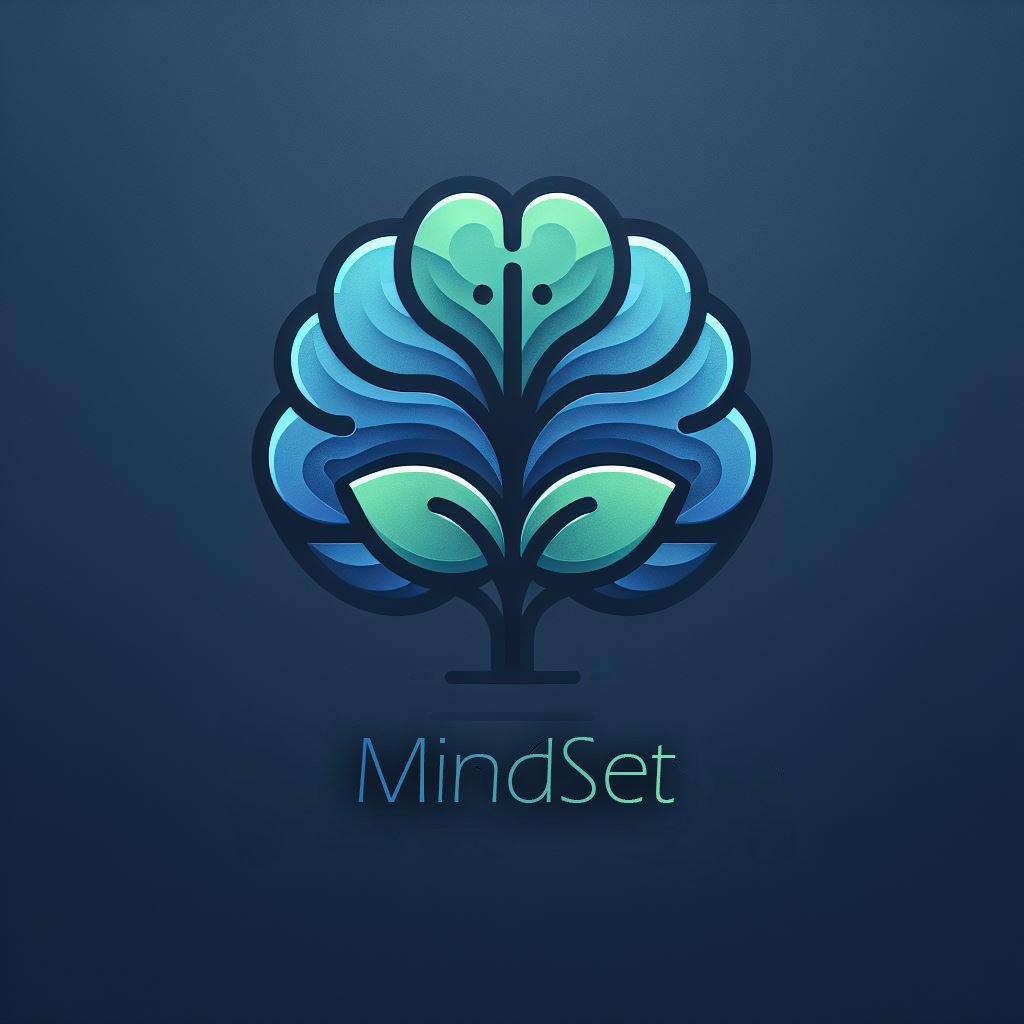
<style>
.page{position:relative;width:1024px;height:1024px}
.page>*{position:absolute;margin:0}
.t1{font:96.5px "ErasITC-Light"}
</style>
<div class="page">
<p class="t1" style="left:358px;top:737px;width:318px;height:66px">MindSet</p>
</div>
